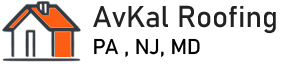
<style>
.page{position:relative;width:300px;height:64px;background:#ffffff}
.page>*{position:absolute;margin:0}
.t1{font:29.7px/27.6px "Bahnschrift";color:#222222}
.t2{font:21.2px/27.6px "Bahnschrift";color:#000000}
</style>
<div class="page">
<p class="t1" style="left:93px;top:5px;width:183px;height:53px">AvKal Roofing<br><span class="t2">PA , NJ, MD</span></p>
</div>
